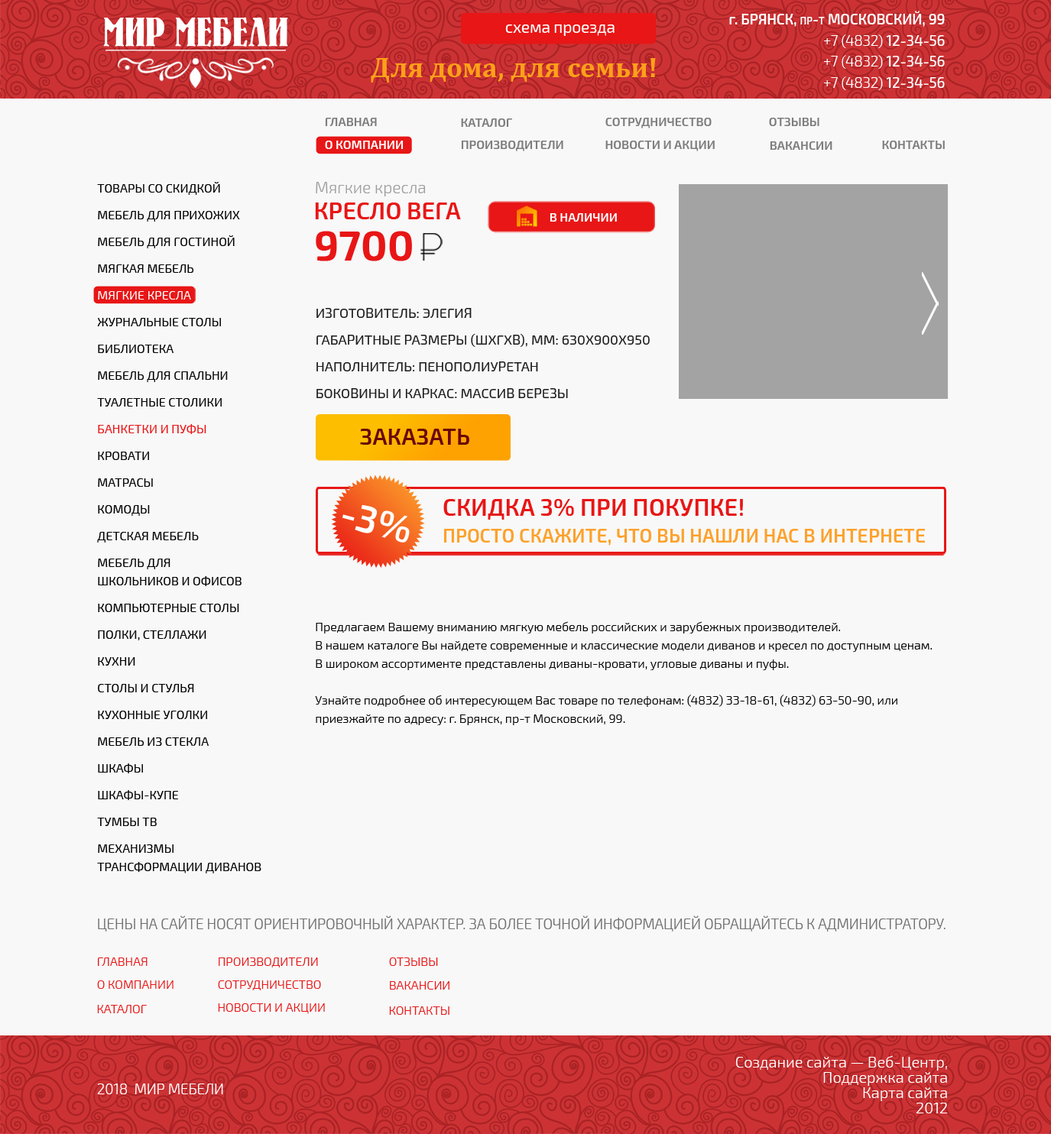
<style>
.page{position:relative;width:1051px;height:1134px;background:#f8f8f8}
.page>*{position:absolute;margin:0}
.t1{font:14.2px/21.3px "Exo2-SemiBold";color:#ffffff;text-transform:uppercase}
.t2{font:14.2px/21.3px "Exo2-SemiBold";color:#ffffff}
.t3{font:14.2px/21.3px "Exo2-SemiBold";color:#ffffff;font-variant:small-caps}
.t4{font:14.2px/21.3px "Exo2-Light";color:#ffffff;text-transform:uppercase}
.t5{font:14.2px/21.3px "Exo2-Medium";color:#ffffff;text-transform:uppercase}
.t6{font:15.7px "Exo2-Regular";color:#ffffff}
.t7{font:28.2px "Cambria-Bold";color:#ffa019}
.t8{font:12.2px "Exo2-SemiBold";color:#7d7d7d;text-transform:uppercase}
.t9{font:12.2px "Exo2-SemiBold";color:#ffffff;text-transform:uppercase}
.t10{font:12.2px/26.8px "Exo2-Regular";color:#000000;text-transform:uppercase}
.t11{font:12.2px/26.8px "Exo2-Regular";color:#ffffff;text-transform:uppercase}
.t12{font:12.2px/26.8px "Exo2-Regular";color:#e81616;text-transform:uppercase}
.t13{font:12.2px/18.3px "Exo2-Regular";color:#000000;text-transform:uppercase}
.t14{font:16.1px "Exo2-Light";color:#9e9e9e}
.t15{font:23.7px "Exo2-SemiBold";color:#e81616;text-transform:uppercase}
.t16{font:42px "Exo2-Bold";color:#e81616}
.t17{font:13.8px/26.8px "Exo2-Regular";color:#1d1d1d;text-transform:uppercase}
.t18{font:23.2px "Exo2-SemiBold";color:#690606;text-transform:uppercase}
.t19{font:38.5px "Exo2-SemiBold";color:#ffffff;text-transform:uppercase}
.t20{font:19.1px/26.8px "Exo2-SemiBold";color:#fda12b;text-transform:uppercase}
.t21{font:23.9px/26.8px "Exo2-SemiBold";color:#e81616;text-transform:uppercase}
.t22{font:12.2px/18.3px "Exo2-Light";color:#000000}
.t23{font:14.3px "Exo2-Light";color:#717171;text-transform:uppercase}
.t24{font:12.2px "Exo2-Light";color:#e81616;text-transform:uppercase}
.t25{font:15.3px/15.3px "Exo2-Light";color:#ffffff}
.t26{font:14.3px "Exo2-Light";color:#ffffff;text-transform:uppercase}
</style>
<div class="page">
<p class="t1" style="left:729px;top:11px;width:216px;height:80px;text-align:right"><span class="t2">г.</span> Брянск, <span class="t3">пр-т</span> Московский, 99<br><span class="t4">+7 (4832) </span><span class="t5">12-34-56<br></span><span class="t4">+7 (4832) </span><span class="t5">12-34-56<br></span><span class="t4">+7 (4832) </span><span class="t5">12-34-56</span></p>
<p class="t6" style="left:505px;top:24px;width:110px;height:12px">схема проезда</p>
<p class="t7" style="left:371px;top:58px;width:285px;height:25px">Для дома, для семьи!</p>
<p class="t8" style="left:325px;top:118px;width:52px;height:8px">Главная</p>
<p class="t8" style="left:461px;top:118px;width:51px;height:9px">КАТАЛОГ</p>
<p class="t8" style="left:605px;top:118px;width:107px;height:10px">СОТРУДНИЧЕСТвО</p>
<p class="t8" style="left:769px;top:118px;width:50px;height:8px">ОТЗЫвЫ</p>
<p class="t9" style="left:325px;top:141px;width:79px;height:8px">О КОМПАНИИ</p>
<p class="t8" style="left:461px;top:141px;width:102px;height:10px">ПРОИЗвОДИТЕЛИ</p>
<p class="t8" style="left:605px;top:141px;width:110px;height:10px">НОвОСТИ И АКЦИИ</p>
<p class="t8" style="left:770px;top:141px;width:62px;height:9px">вАКАНСИИ</p>
<p class="t8" style="left:882px;top:141px;width:63px;height:8px">КОНТАКТЫ</p>
<p class="t10" style="left:97px;top:182px;width:164px;height:692px">Товары со скидкой<br>Мебель для прихожих<br>Мебель для гостиной<br>Мягкая мебель<br><span class="t11">Мягкие кресла<br></span>Журнальные столы<br>Библиотека<br>Мебель для спальни<br>Туалетные столики<br><span class="t12">Банкетки и пуфы<br></span>Кровати<br>Матрасы<br>Комоды<br>Детская мебель<br>Мебель для <br><span class="t13">школьников и офисов<br></span>Компьютерные столы<br>Полки, Стеллажи<br>Кухни<br>Столы и стулья<br>Кухонные уголки<br>Мебель из стекла<br>Шкафы<br>Шкафы-купе<br>Тумбы ТВ<br>Механизмы <br><span class="t13">трансформации диванов</span></p>
<p class="t14" style="left:316px;top:182px;width:110px;height:14px">Мягкие кресла</p>
<p class="t15" style="left:315px;top:203px;width:146px;height:16px">КРЕСЛО вЕГА</p>
<p class="t9" style="left:550px;top:213px;width:67px;height:9px">в наличии</p>
<p class="t16" style="left:316px;top:231px;width:96px;height:30px">9700</p>
<p class="t17" style="left:316px;top:308px;width:334px;height:90px">Изготовитель: Элегия<br>Габаритные размеры (ШхГхВ), мм: 630х900х950<br>Наполнитель: пенополиуретан<br>Боковины и каркас: массив березы</p>
<p class="t18" style="left:360px;top:429px;width:109px;height:16px">ЗАКАЗАТЬ</p>
<p class="t19" style="left:342px;top:505px;width:68px;height:38px;rotate:15deg">-3%</p>
<p class="t20" style="left:443px;top:499px;width:482px;height:47px"><span class="t21">СКИДКА 3% ПРИ ПОКУПКЕ!<br></span>ПРОСТО СКАЖИТЕ, ЧТО вЫ НАШЛИ НАС в ИНТЕРНЕТЕ</p>
<p class="t22" style="left:315px;top:621px;width:617px;height:105px">Предлагаем Вашему вниманию мягкую мебель российских и зарубежных производителей. <br>В нашем каталоге Вы найдете современные и классические модели диванов и кресел по доступным ценам. <br>В широком ассортименте представлены диваны-кровати, угловые диваны и пуфы.<br><br>Узнайте подробнее об интересующем Вас товаре по телефонам: (4832) 33-18-61, (4832) 63-50-90, или <br>приезжайте по адресу: г. Брянск, пр-т Московский, 99.</p>
<p class="t23" style="left:98px;top:916px;width:848px;height:16px">Цены на сайте носят ориентировочный характер. За более точной информацией обращайтесь к администратору.</p>
<p class="t24" style="left:98px;top:958px;width:50px;height:8px">Главная</p>
<p class="t24" style="left:219px;top:958px;width:99px;height:10px">ПРОИЗвОДИТЕЛИ</p>
<p class="t24" style="left:389px;top:958px;width:49px;height:8px">ОТЗЫвЫ</p>
<p class="t24" style="left:97px;top:981px;width:77px;height:8px">О КОМПАНИИ</p>
<p class="t24" style="left:218px;top:981px;width:103px;height:10px">СОТРУДНИЧЕСТвО</p>
<p class="t24" style="left:390px;top:982px;width:59px;height:8px">вАКАНСИИ</p>
<p class="t24" style="left:97px;top:1005px;width:50px;height:9px">КАТАЛОГ</p>
<p class="t24" style="left:218px;top:1004px;width:107px;height:10px">НОвОСТИ И АКЦИИ</p>
<p class="t24" style="left:389px;top:1007px;width:60px;height:8px">КОНТАКТЫ</p>
<p class="t25" style="left:736px;top:1056px;width:212px;height:58px;text-align:right">Создание сайта — Веб-Центр,<br>Поддержка сайта<br>Карта сайта<br>2012</p>
<p class="t26" style="left:97px;top:1084px;width:126px;height:11px">2018  МИР МЕБЕЛИ</p>
</div>
